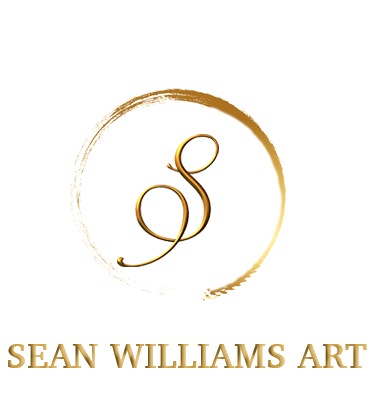
<style>
.page{position:relative;width:374px;height:417px;background:#ffffff}
.page>*{position:absolute;margin:0}
.t1{font:36px "Charter-Bold";letter-spacing:0.01em}
</style>
<div class="page">
<p class="t1" style="left:8px;top:344px;width:359px;height:24px">SEAN WILLIAMS ART</p>
</div>
